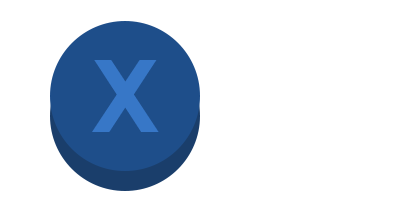
<style>
.page{position:relative;width:400px;height:200px;background:#ffffff}
.page>*{position:absolute;margin:0}
.t1{font:100px "Arial-BoldMT";color:#3777c7}
</style>
<div class="page">
<p class="t1" style="left:92px;top:60px;width:67px;height:72px">X</p>
</div>
